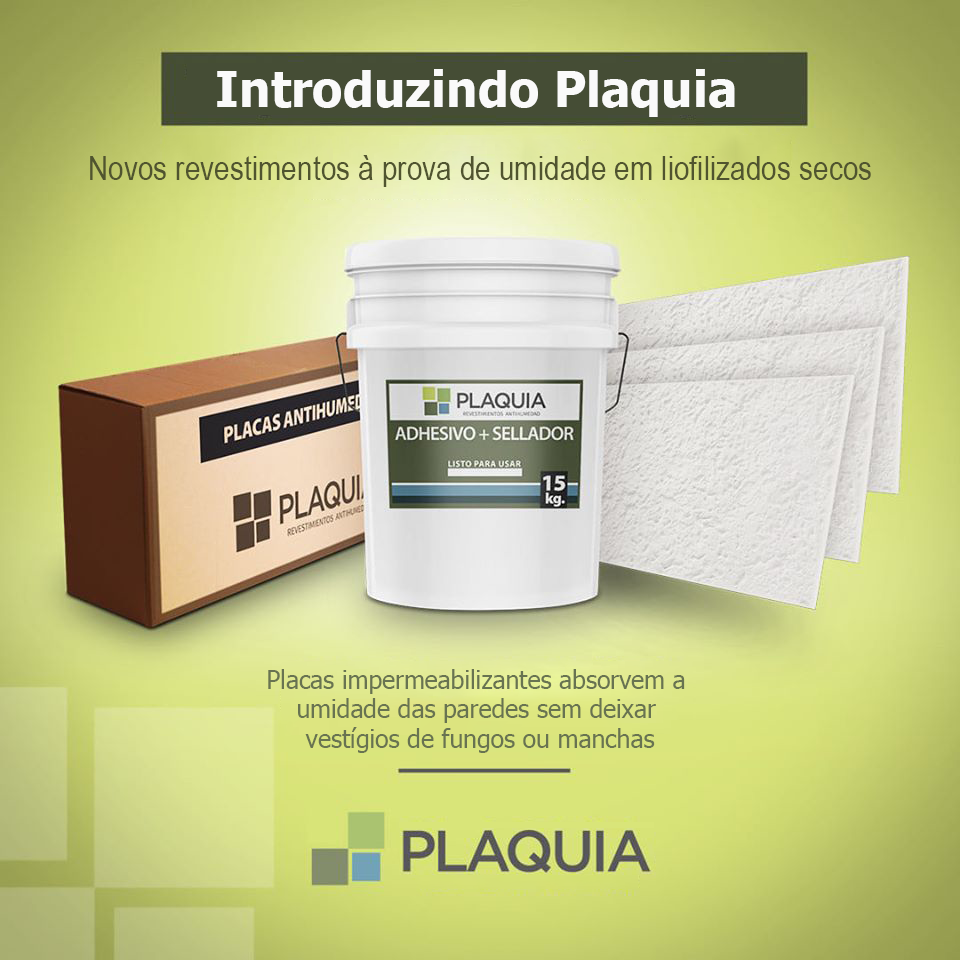
<style>
.page{position:relative;width:960px;height:960px}
.page>*{position:absolute;margin:0}
.t1{font:49.3px "Tahoma-Bold";color:#fafafa}
.t2{font:34.3px "ArialNarrow";color:#50542f}
.t3{font:24.7px "Tahoma";color:#687351}
</style>
<div class="page">
<p class="t1" style="left:217px;top:69px;width:518px;height:48px">Introduzindo Plaquia</p>
<p class="t2" style="left:90px;top:155px;width:781px;height:32px">Novos revestimentos à prova de umidade em liofilizados secos</p>
<p class="t3" style="left:268px;top:669px;width:417px;height:84px;text-align:center">Placas impermeabilizantes absorvem a <br>umidade das paredes sem deixar <br>vestígios de fungos ou manchas</p>
</div>
